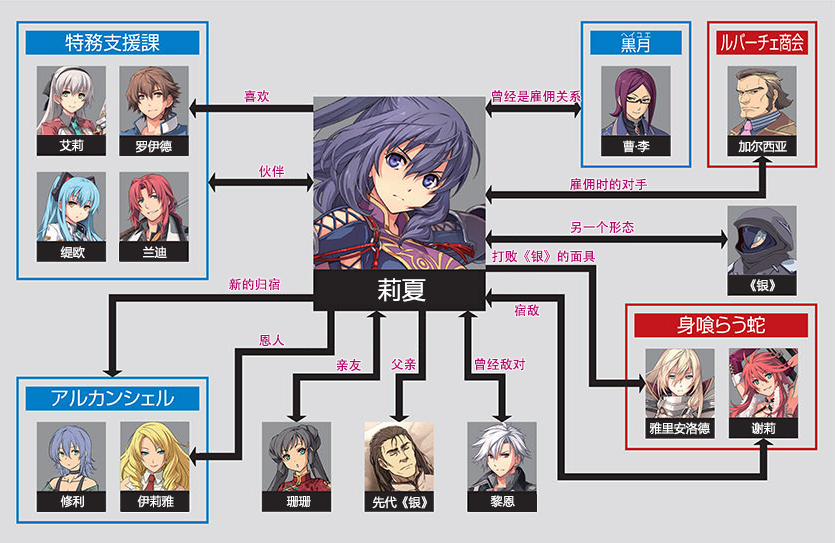
<style>
.page{position:relative;width:835px;height:543px;background:#dddddf}
.page>*{position:absolute;margin:0}
.t1{font:13px "AdobeHeitiStd-Regular";color:#b70773}
.t2{font:12px "MicrosoftYaHei";color:#ffffff}
.t3{font:24px "MicrosoftYaHei";color:#ffffff}
</style>
<div class="page">
<p class="t1" style="left:244px;top:90px;width:25px;height:13px">喜欢</p>
<p class="t1" style="left:492px;top:90px;width:89px;height:13px">曾经是雇佣关系</p>
<p class="t2" style="left:59px;top:139px;width:25px;height:13px">艾莉</p>
<p class="t2" style="left:135px;top:140px;width:37px;height:13px">罗伊德</p>
<p class="t2" style="left:623px;top:140px;width:27px;height:13px">曹·李</p>
<p class="t2" style="left:738px;top:140px;width:49px;height:13px">加尔西亚</p>
<p class="t1" style="left:259px;top:165px;width:25px;height:13px">伙伴</p>
<p class="t1" style="left:570px;top:178px;width:77px;height:13px">雇佣时的对手</p>
<p class="t1" style="left:570px;top:221px;width:64px;height:13px">另一个形态</p>
<p class="t2" style="left:60px;top:246px;width:25px;height:13px">缇欧</p>
<p class="t2" style="left:143px;top:246px;width:24px;height:12px">兰迪</p>
<p class="t1" style="left:492px;top:250px;width:103px;height:13px">打败《银》的面具</p>
<p class="t1" style="left:229px;top:278px;width:51px;height:13px">新的归宿</p>
<p class="t3" style="left:378px;top:278px;width:48px;height:24px">莉夏</p>
<p class="t2" style="left:750px;top:279px;width:25px;height:13px">《银》</p>
<p class="t1" style="left:514px;top:304px;width:26px;height:13px">宿敌</p>
<p class="t1" style="left:259px;top:334px;width:26px;height:12px">恩人</p>
<p class="t1" style="left:336px;top:359px;width:25px;height:13px">亲友</p>
<p class="t1" style="left:391px;top:358px;width:25px;height:13px">父亲</p>
<p class="t1" style="left:475px;top:358px;width:51px;height:13px">曾经敌对</p>
<p class="t2" style="left:649px;top:422px;width:61px;height:13px">雅里安洛德</p>
<p class="t2" style="left:751px;top:422px;width:25px;height:13px">谢莉</p>
<p class="t2" style="left:60px;top:495px;width:24px;height:13px">修利</p>
<p class="t2" style="left:137px;top:495px;width:37px;height:13px">伊莉雅</p>
<p class="t2" style="left:286px;top:496px;width:25px;height:12px">珊珊</p>
<p class="t2" style="left:372px;top:496px;width:55px;height:13px">先代《银》</p>
<p class="t2" style="left:490px;top:495px;width:25px;height:13px">黎恩</p>
</div>
